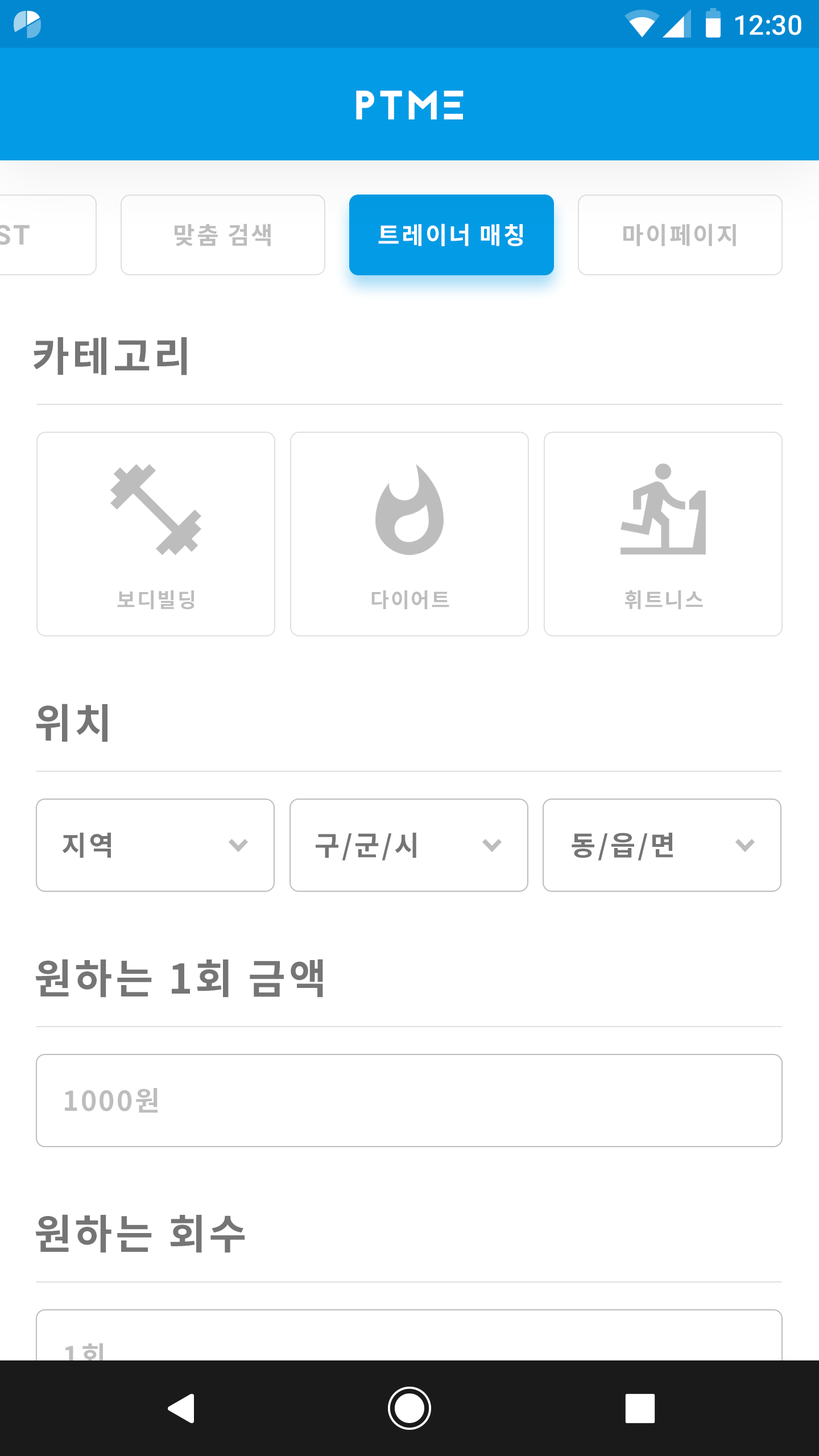
<style>
.page{position:relative;width:819px;height:1456px;background:#ffffff}
.page>*{position:absolute;margin:0}
.t1{font:27.3px "Roboto-Medium";color:#ffffff}
.t2{font:40.9px "Jaapokkisubtract-Regular";letter-spacing:0.05em;color:#ffffff}
.t3{font:23.9px "NotoSansCJKkr-Bold";letter-spacing:0.072em;color:#bdbdbd}
.t4{font:23.9px "NotoSansCJKkr-Bold";letter-spacing:0.072em;color:#ffffff}
.t5{font:40.9px "NotoSansCJKkr-Bold";letter-spacing:0.072em;color:#757575}
.t6{font:20.5px "NotoSansCJKkr-Bold";letter-spacing:0.072em;color:#bdbdbd}
.t7{font:27.3px "NotoSansCJKkr-Bold";letter-spacing:0.072em;color:#757575}
.t8{font:27.3px "NotoSansCJKkr-Bold";letter-spacing:0.072em;color:#bdbdbd}
</style>
<div class="page">
<p class="t1" style="left:735px;top:15px;width:66px;height:20px">12:30</p>
<p class="t2" style="left:356px;top:90px;width:108px;height:29px">PTME</p>
<p class="t3" style="left:175px;top:224px;width:96px;height:22px">맞춤 검색</p>
<p class="t4" style="left:378px;top:224px;width:145px;height:22px">트레이너 매칭</p>
<p class="t3" style="left:623px;top:224px;width:113px;height:22px">마이페이지</p>
<p class="t5" style="left:33px;top:337px;width:154px;height:38px">카테고리</p>
<p class="t6" style="left:117px;top:590px;width:78px;height:20px">보디빌딩</p>
<p class="t6" style="left:371px;top:590px;width:78px;height:20px">다이어트</p>
<p class="t6" style="left:624px;top:590px;width:79px;height:20px">휘트니스</p>
<p class="t5" style="left:36px;top:704px;width:71px;height:38px">위치</p>
<p class="t7" style="left:62px;top:833px;width:49px;height:25px">지역</p>
<p class="t7" style="left:316px;top:833px;width:100px;height:28px">구/군/시</p>
<p class="t7" style="left:572px;top:833px;width:101px;height:28px">동/읍/면</p>
<p class="t5" style="left:35px;top:959px;width:288px;height:39px">원하는 1회 금액</p>
<p class="t8" style="left:65px;top:1088px;width:93px;height:25px">1000원</p>
<p class="t5" style="left:35px;top:1214px;width:210px;height:39px">원하는 회수</p>
</div>
